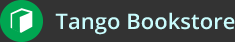
<style>
.page{position:relative;width:235px;height:42px;background:#333333}
.page>*{position:absolute;margin:0}
.t1{font:21.6px "OpenSans-Semibold";color:#c9fcfd}
</style>
<div class="page">
<p class="t1" style="left:55px;top:12px;width:180px;height:23px">Tango Bookstore</p>
</div>
